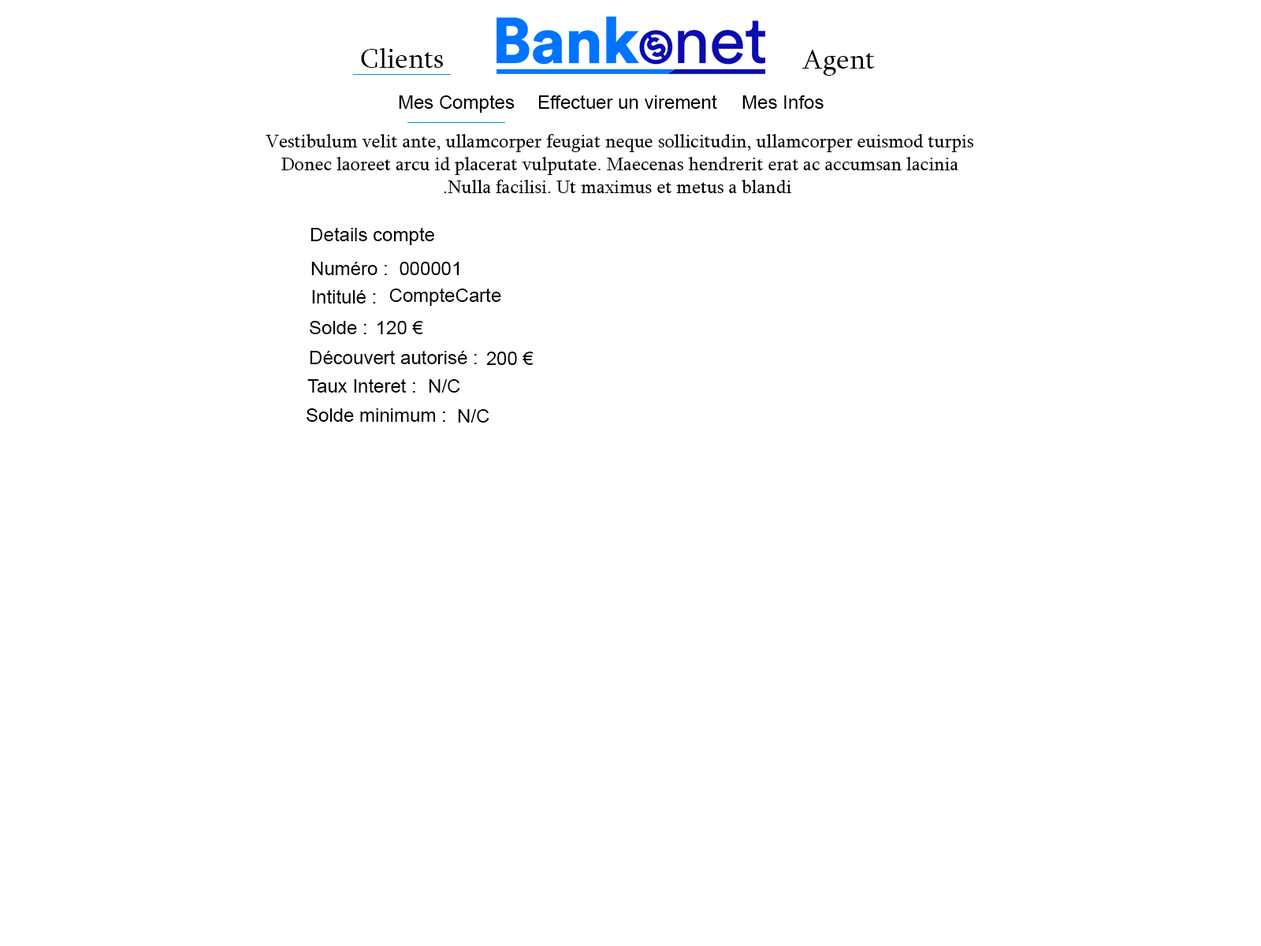
<style>
.page{position:relative;width:1261px;height:946px;background:#ffffff}
.page>*{position:absolute;margin:0}
.t1{font:28.4px "Sylfaen";color:#000000}
.t2{font:18.9px "ArialMT";color:#000000}
.t3{font:18.9px "Sylfaen";color:#000000}
</style>
<div class="page">
<p class="t1" style="left:361px;top:48px;width:82px;height:20px">Clients</p>
<p class="t1" style="left:802px;top:50px;width:73px;height:26px">Agent</p>
<p class="t2" style="left:399px;top:95px;width:116px;height:18px">Mes Comptes</p>
<p class="t2" style="left:538px;top:95px;width:179px;height:14px">Effectuer un virement</p>
<p class="t2" style="left:742px;top:95px;width:82px;height:14px">Mes Infos</p>
<p class="t3" style="left:266px;top:134px;width:707px;height:59px;text-align:center">Vestibulum velit ante, ullamcorper feugiat neque sollicitudin, ullamcorper euismod turpis <br>Donec laoreet arcu id placerat vulputate. Maecenas hendrerit erat ac accumsan lacinia <br>Nulla facilisi. Ut maximus et metus a blandi.</p>
<p class="t2" style="left:311px;top:227px;width:123px;height:18px">Details compte</p>
<p class="t2" style="left:311px;top:262px;width:76px;height:13px">Numéro :</p>
<p class="t2" style="left:400px;top:262px;width:59px;height:13px">000001</p>
<p class="t2" style="left:312px;top:289px;width:64px;height:14px">Intitulé :</p>
<p class="t2" style="left:389px;top:288px;width:112px;height:18px">CompteCarte</p>
<p class="t2" style="left:310px;top:321px;width:56px;height:13px">Solde :</p>
<p class="t2" style="left:377px;top:321px;width:46px;height:13px">120 €</p>
<p class="t2" style="left:310px;top:350px;width:167px;height:14px">Découvert autorisé :</p>
<p class="t2" style="left:486px;top:351px;width:48px;height:14px">200 €</p>
<p class="t2" style="left:307px;top:378px;width:108px;height:14px">Taux Interet :</p>
<p class="t2" style="left:429px;top:379px;width:31px;height:13px">N/C</p>
<p class="t2" style="left:307px;top:408px;width:138px;height:14px">Solde minimum :</p>
<p class="t2" style="left:458px;top:409px;width:31px;height:13px">N/C</p>
</div>
